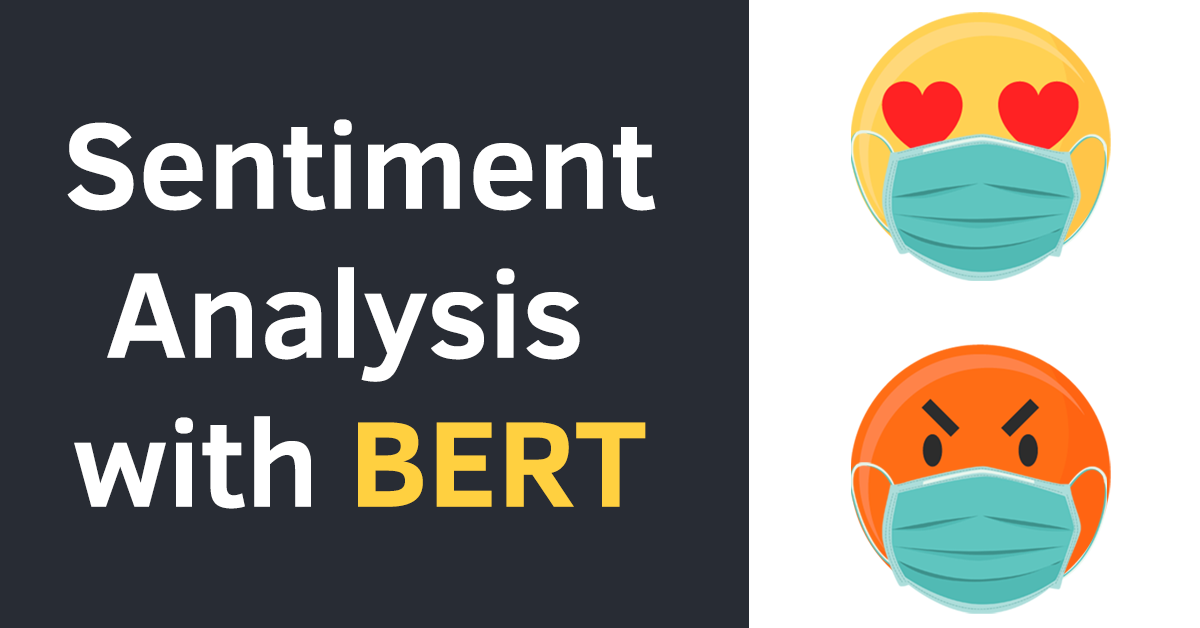
<style>
.page{position:relative;width:1200px;height:628px;background:#282c34}
.page>*{position:absolute;margin:0}
.t1{font:124.2px "ClearSans-Bold";color:#ffffff}
.t2{font:124.2px "ClearSans-Bold";color:#ffd040}
</style>
<div class="page">
<p class="t1" style="left:67px;top:119px;width:589px;height:390px;text-align:center">Sentiment<br>Analysis <br>with <span class="t2">BERT</span></p>
</div>
